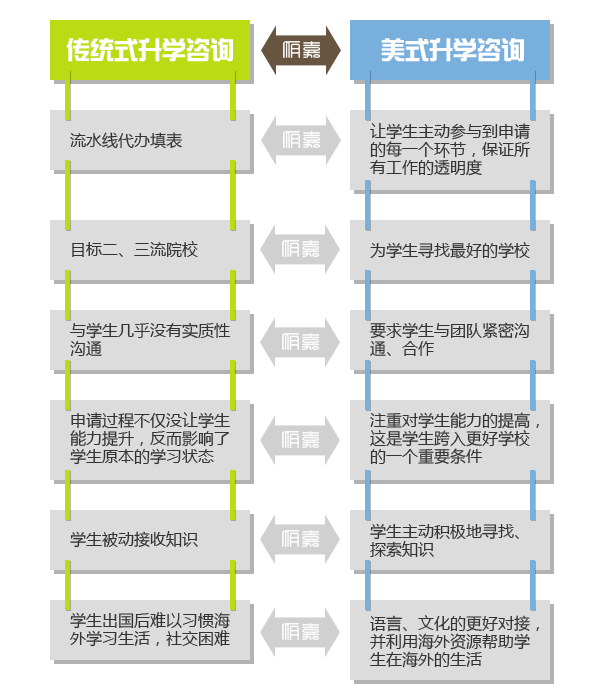
<style>
.page{position:relative;width:600px;height:690px;background:#ffffff}
.page>*{position:absolute;margin:0}
.t1{font:24px "SingYiEG-Ultra-GB";color:#ffffff}
.t2{font:16px/18px "MicrosoftYaHei";color:#333333}
.t3{font:16px "MicrosoftYaHei";color:#333333}
</style>
<div class="page">
<p class="t1" style="left:66px;top:38px;width:167px;height:24px">传统式升学咨询</p>
<p class="t1" style="left:381px;top:38px;width:143px;height:24px">美式升学咨询</p>
<p class="t2" style="left:370px;top:123px;width:160px;height:53px">让学生主动参与到申请<br>的每一个环节，保证所<br>有工作的透明度</p>
<p class="t3" style="left:70px;top:132px;width:112px;height:17px">流水线代办填表</p>
<p class="t3" style="left:72px;top:241px;width:126px;height:16px">目标二、三流院校</p>
<p class="t3" style="left:370px;top:242px;width:160px;height:17px">为学生寻找最好的学校</p>
<p class="t2" style="left:70px;top:322px;width:160px;height:34px">与学生几乎没有实质性<br>沟通</p>
<p class="t2" style="left:370px;top:322px;width:159px;height:34px">要求学生与团队紧密沟<br>通、合作</p>
<p class="t2" style="left:70px;top:412px;width:160px;height:53px">申请过程不仅没让学生<br>能力提升，反而影响了<br>学生原本的学习状态</p>
<p class="t2" style="left:370px;top:412px;width:169px;height:52px">注重对学生能力的提高，<br>这是学生跨入更好学校<br>的一个重要条件</p>
<p class="t3" style="left:70px;top:531px;width:128px;height:17px">学生被动接收知识</p>
<p class="t2" style="left:370px;top:523px;width:149px;height:34px">学生主动积极地寻找、<br>探索知识</p>
<p class="t2" style="left:70px;top:612px;width:160px;height:35px">学生出国后难以习惯海<br>外学习生活，社交困难</p>
<p class="t2" style="left:370px;top:615px;width:169px;height:53px">语言、文化的更好对接，<br>并利用海外资源帮助学<br>生在海外的生活</p>
</div>
